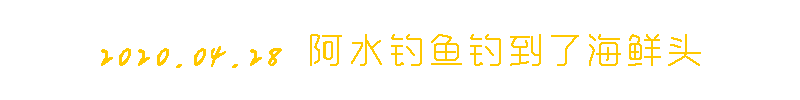
<style>
.page{position:relative;width:800px;height:100px;background:#ffffff}
.page>*{position:absolute;margin:0}
.t1{font:36px "zhimang-xing";letter-spacing:0.075em;color:#ffc800;font-weight:bold}
.t2{font:36px "ZXF-Mengxin-Trial";letter-spacing:0.075em;color:#000000;font-weight:bold}
.t3{font:36px "ZXFShiYaTrial-UltraLight";letter-spacing:0.075em;color:#ffc800;font-weight:bold}
</style>
<div class="page">
<p class="t1" style="left:101px;top:34px;width:600px;height:34px"><span class="t2"> </span>2020.04.28 <span class="t3">阿水钓鱼钓到了海鲜头</span></p>
</div>
